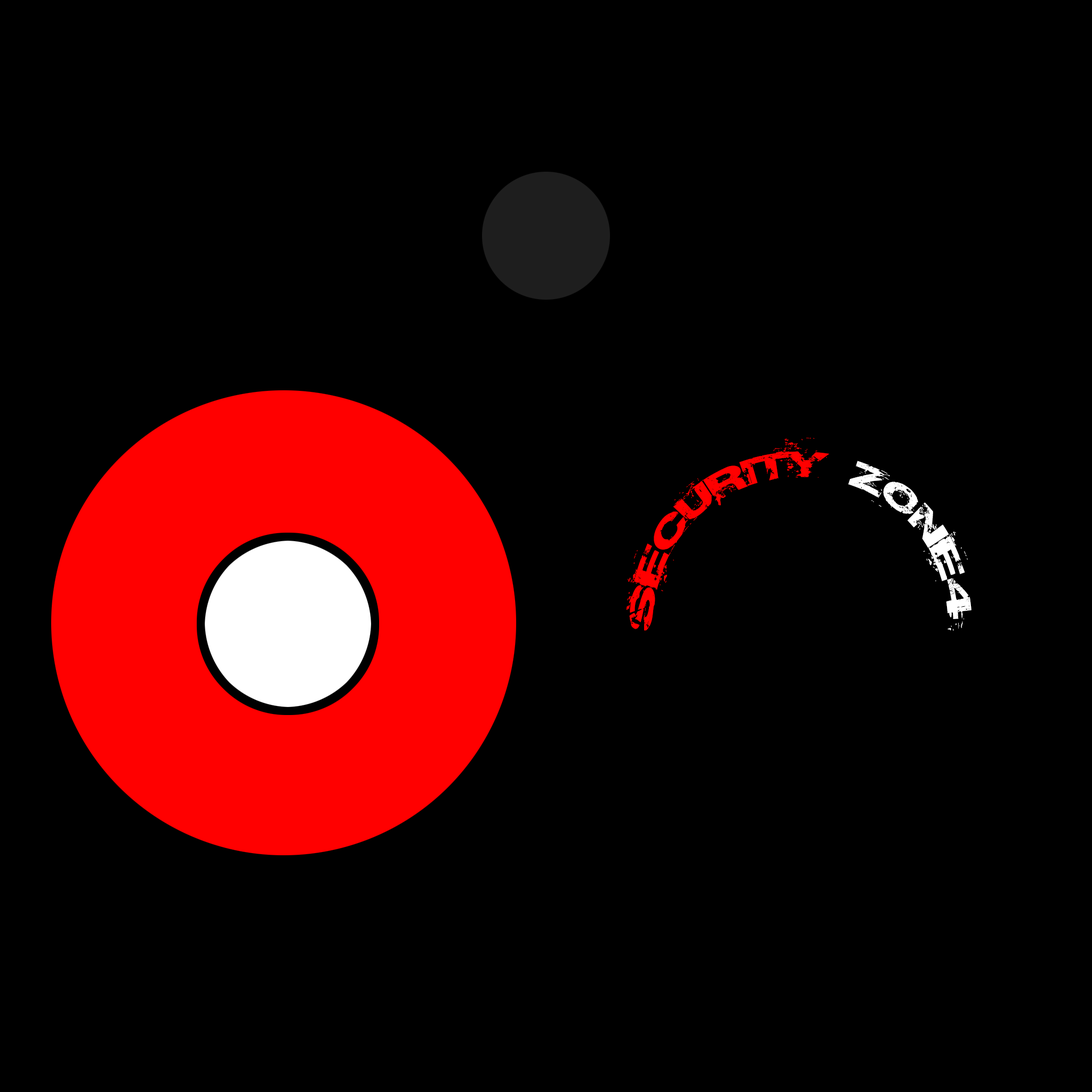
<style>
.page{position:relative;width:1092px;height:1092px;background:#000000}
.page>*{position:absolute;margin:0}
.t1{font:31.4px "Base02";letter-spacing:0.025em;color:#ff0000;scale:0.96 1}
.t2{font:31.4px "Base02";letter-spacing:0.025em;color:#ffffff;scale:0.96 1}
</style>
<div class="page">
<p class="t1" style="left:627px;top:438px;width:344px;height:193px;text-align:center">security <span class="t2">zone4</span></p>
</div>
